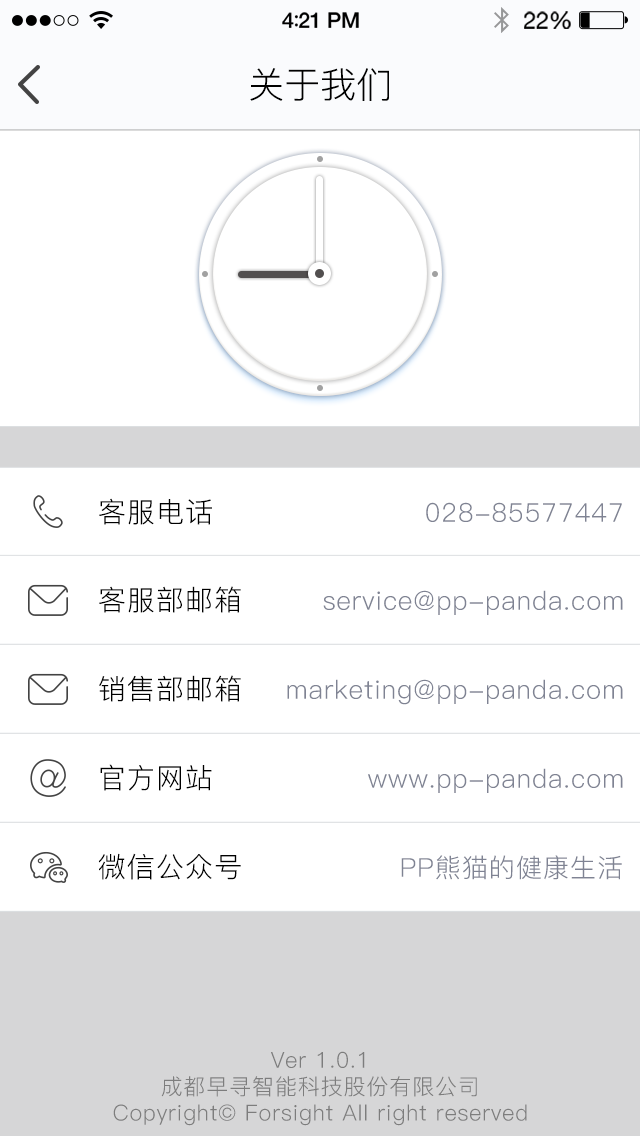
<style>
.page{position:relative;width:640px;height:1136px;background:#ffffff}
.page>*{position:absolute;margin:0}
.t1{font:36px "PingFang-SC-Regular";color:#000000}
.t2{font:28px "PingFang-SC-Regular";letter-spacing:0.04em;color:#000000}
.t3{font:26px "PingFang-SC-Regular";letter-spacing:0.04em;color:#7f8393}
.t4{font:22px "PingFang-SC-Regular";letter-spacing:0.04em;color:#7d7d7d}
</style>
<div class="page">
<p class="t1" style="left:250px;top:68px;width:139px;height:33px">关于我们</p>
<p class="t2" style="left:99px;top:498px;width:113px;height:27px">客服电话</p>
<p class="t3" style="left:426px;top:502px;width:196px;height:20px">028-85577447</p>
<p class="t2" style="left:99px;top:586px;width:142px;height:27px">客服部邮箱</p>
<p class="t3" style="left:323px;top:590px;width:300px;height:25px">service@pp-panda.com</p>
<p class="t2" style="left:99px;top:675px;width:142px;height:27px">销售部邮箱</p>
<p class="t3" style="left:287px;top:679px;width:336px;height:26px">marketing@pp-panda.com</p>
<p class="t2" style="left:100px;top:764px;width:112px;height:27px">官方网站</p>
<p class="t3" style="left:368px;top:768px;width:255px;height:25px">www.pp-panda.com</p>
<p class="t2" style="left:98px;top:853px;width:143px;height:27px">微信公众号</p>
<p class="t3" style="left:401px;top:855px;width:221px;height:25px">PP熊猫的健康生活</p>
<p class="t4" style="left:113px;top:1051px;width:414px;height:75px;text-align:center">Ver 1.0.1<br>成都早寻智能科技股份有限公司<br>Copyright© Forsight All right reserved</p>
</div>
